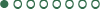
<style>
.page{position:relative;width:100px;height:9px;background:#ffffff}
.page>*{position:absolute;margin:0}
.t1{font:12.7px "DXBangtango-KSCpc-EUC-H";letter-spacing:0.02em;color:#356e4d}
.t2{font:13.2px "DXBangtango-KSCpc-EUC-H";letter-spacing:0.02em;color:#356e4d}
</style>
<div class="page">
<p class="t1" style="left:0px;top:0px;width:100px;height:9px"><span class="t2">●</span>○○○○○○○</p>
</div>
